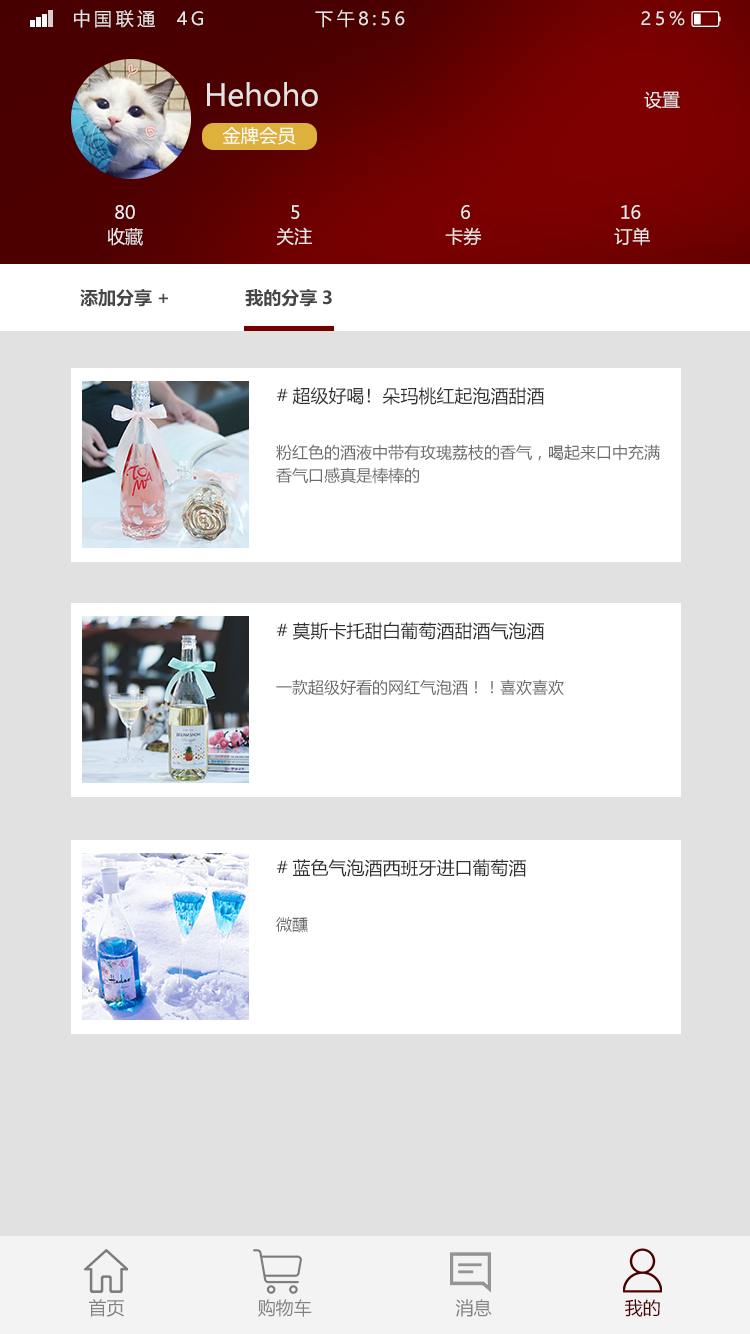
<style>
.page{position:relative;width:750px;height:1334px;background:#e1e1e1}
.page>*{position:absolute;margin:0}
.t1{font:18px "MicrosoftYaHei";letter-spacing:0.2em;color:#e6e6e6}
.t2{font:30px "MicrosoftYaHei";color:#e3e3e3}
.t3{font:18px "MicrosoftYaHei";color:#ebebeb}
.t4{font:18px "MicrosoftYaHei";color:#fefefe}
.t5{font:18px "MicrosoftYaHei-Bold";color:#464646}
.t6{font:18px "MicrosoftYaHei";color:#303030}
.t7{font:16px "MicrosoftYaHei";color:#6c6c6c}
.t8{font:18px "MicrosoftYaHei";color:#828282}
.t9{font:18px "MicrosoftYaHei";color:#4d0000}
</style>
<div class="page">
<p class="t1" style="left:74px;top:9px;width:611px;height:19px">中国联通  4G            下午8:56                          25%</p>
<p class="t2" style="left:207px;top:82px;width:111px;height:25px">Hehoho</p>
<p class="t3" style="left:644px;top:91px;width:36px;height:18px">设置</p>
<p class="t4" style="left:222px;top:127px;width:74px;height:18px">金牌会员</p>
<p class="t3" style="left:115px;top:205px;width:526px;height:14px">80                             5                              6                            16</p>
<p class="t3" style="left:107px;top:227px;width:543px;height:19px">收藏                         关注                         卡券                         订单</p>
<p class="t5" style="left:80px;top:289px;width:252px;height:18px">添加分享+              我的分享3</p>
<p class="t6" style="left:276px;top:387px;width:268px;height:18px">#超级好喝！朵玛桃红起泡酒甜酒</p>
<p class="t7" style="left:276px;top:444px;width:384px;height:17px">粉红色的酒液中带有玫瑰荔枝的香气，喝起来口中充满</p>
<p class="t7" style="left:276px;top:467px;width:143px;height:17px">香气口感真是棒棒的</p>
<p class="t6" style="left:276px;top:622px;width:268px;height:18px">#莫斯卡托甜白葡萄酒甜酒气泡酒</p>
<p class="t7" style="left:276px;top:679px;width:288px;height:17px">一款超级好看的网红气泡酒！！喜欢喜欢</p>
<p class="t6" style="left:276px;top:859px;width:250px;height:18px">#蓝色气泡酒西班牙进口葡萄酒</p>
<p class="t7" style="left:276px;top:917px;width:32px;height:16px">微醺</p>
<p class="t8" style="left:89px;top:1299px;width:571px;height:18px">首页                         购物车                           消息                         <span class="t9">我的</span></p>
</div>
